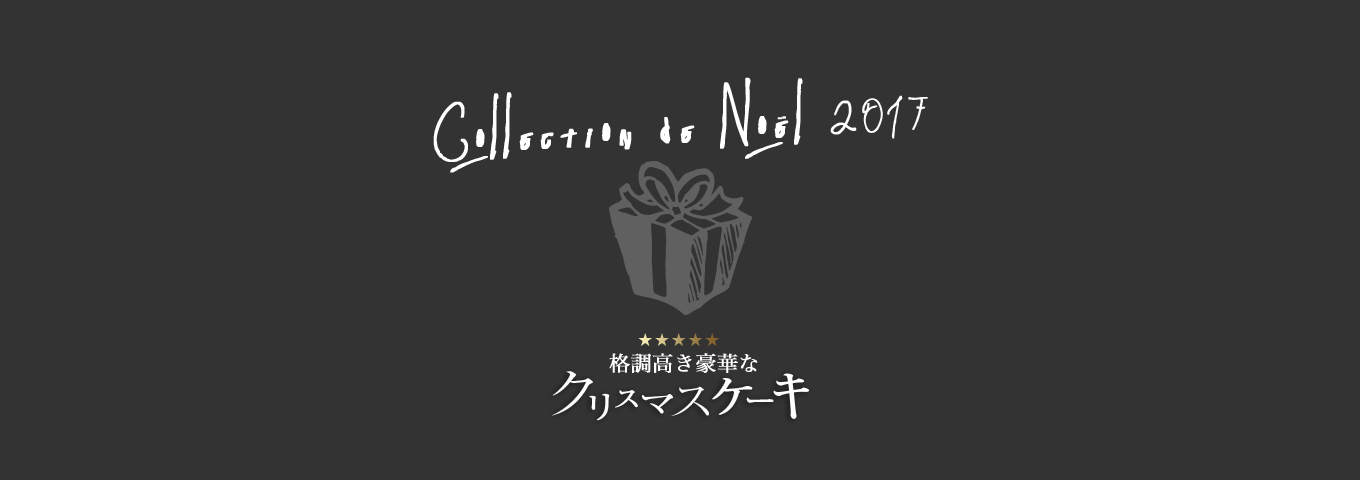
<style>
.page{position:relative;width:1360px;height:480px;background:#333333}
.page>*{position:absolute;margin:0}
.t1{font:79.4px "Pappo'sBluesBandOfficialFont";letter-spacing:0.1em;color:#ffffff;font-weight:bold}
.t2{font:47.6px "Pappo'sBluesBandOfficialFont";letter-spacing:0.1em;color:#ffffff;font-weight:bold}
.t3{font:14px "HiraMinProN-W3";letter-spacing:0.2em}
.t4{font:21px "HiraMinProN-W3";color:#ffffff;font-weight:bold}
.t5{font:57.2px "RyuminPr6N-Light";letter-spacing:0.05em;color:#fdfdfd;scale:1.14 1}
.t6{font:25.4px "RyuminPr6N-Light";letter-spacing:0.05em;color:#fdfdfd;font-weight:bold;scale:1.14 1}
.t7{font:44.1px "RyuminPr6N-Light";letter-spacing:0.05em;color:#fdfdfd;scale:1.14 1}
.t8{font:44.1px "RyuminPr6N-Light";letter-spacing:0.05em;color:#fdfdfd;font-weight:bold;scale:1.14 1}
.t9{font:32.2px "RyuminPr6N-Light";letter-spacing:0.05em;color:#fdfdfd;font-weight:bold;scale:1.14 1}
.t10{font:32.4px "RyuminPr6N-Light";letter-spacing:0.05em;color:#fdfdfd;font-weight:bold;scale:1.14 1}
.t11{font:30.3px "RyuminPr6N-Light";letter-spacing:0.05em;color:#fdfdfd;font-weight:bold;scale:1.14 1}
</style>
<div class="page">
<p class="t1" style="left:433px;top:77px;width:495px;height:96px;rotate:-3deg">Collection de Noël <span class="t2">2017</span></p>
<p class="t3" style="left:638px;top:333px;width:81px;height:13px">★★★★★</p>
<p class="t4" style="left:609px;top:353px;width:149px;height:20px">格調高き豪華な</p>
<p class="t5" style="left:552px;top:371px;width:41px;height:45px">ク</p>
<p class="t6" style="left:615px;top:390px;width:23px;height:18px">ス</p>
<p class="t7" style="left:671px;top:386px;width:38px;height:30px">ス</p>
<p class="t8" style="left:712px;top:378px;width:41px;height:37px">ケ</p>
<p class="t9" style="left:589px;top:393px;width:21px;height:28px">リ</p>
<p class="t10" style="left:642px;top:394px;width:31px;height:20px">マ</p>
<p class="t11" style="left:746px;top:397px;width:28px;height:6px">ー</p>
</div>
